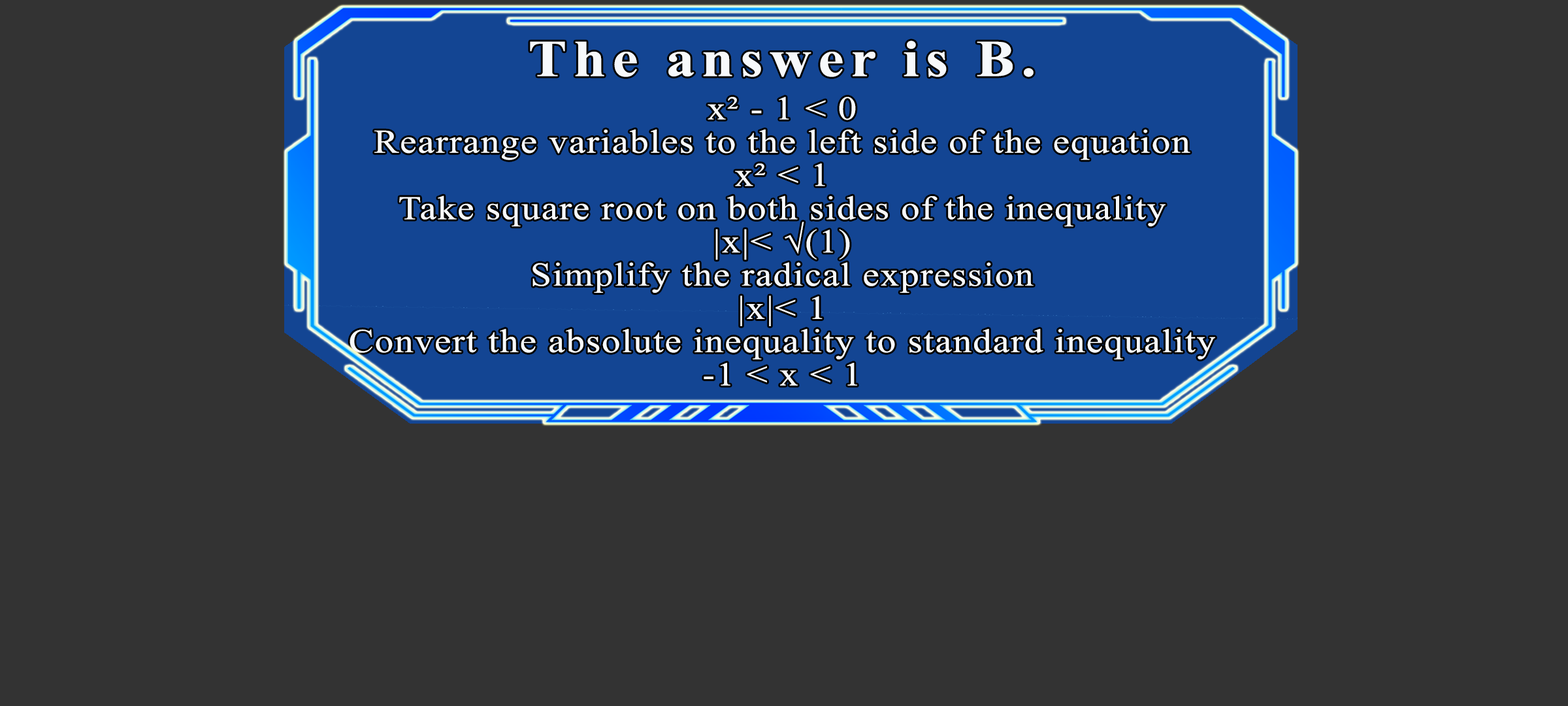
<style>
.page{position:relative;width:1568px;height:706px;background:#333333}
.page>*{position:absolute;margin:0}
.t1{font:51.7px "TimesNewRomanPS-BoldMT";letter-spacing:0.115em;color:#f7f9fb;scale:1.12 1}
.t2{font:33.2px/33.2px "TimesNewRomanPSMT";letter-spacing:0.035em;color:#f7f9fb;scale:1.12 1}
</style>
<div class="page">
<p class="t1" style="left:530px;top:41px;width:504px;height:36px">The answer is B.</p>
<p class="t2" style="left:350px;top:97px;width:865px;height:288px;text-align:center">x² - 1 &lt; 0<br>Rearrange variables to the left side of the equation<br>x² &lt; 1<br>Take square root on both sides of the inequality<br>|x|&lt; √(1)<br>Simplify the radical expression<br>|x|&lt; 1<br>Convert the absolute inequality to standard inequality<br>-1 &lt; x &lt; 1</p>
</div>
